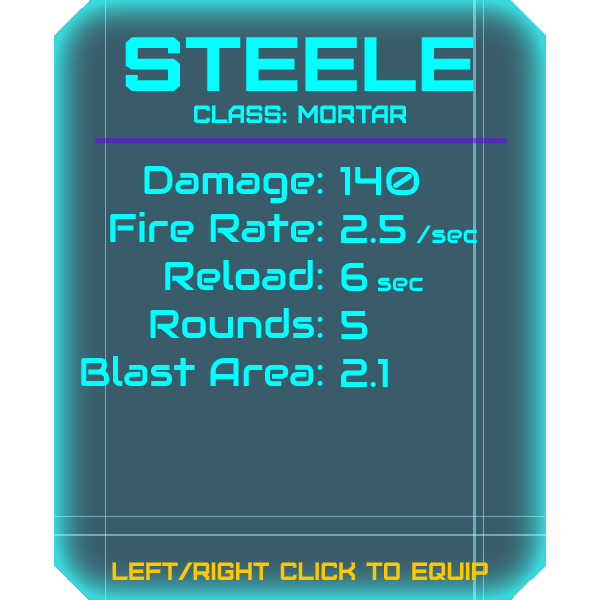
<style>
.page{position:relative;width:600px;height:600px;background:#3a5c6a}
.page>*{position:absolute;margin:0}
.t1{font:76.8px "Furore";color:#00ffff;scale:1.13 1}
.t2{font:25px "Furore";color:#00ffff}
.t3{font:40px "Audiowide-Regular";color:#00ffff}
.t4{font:25px "Audiowide-Regular";color:#00ffff}
.t5{font:25px "Furore";color:#ffc700}
</style>
<div class="page">
<p class="t1" style="left:125px;top:37px;width:349px;height:54px">steele</p>
<p class="t2" style="left:194px;top:105px;width:212px;height:18px">Class: mortar</p>
<p class="t3" style="left:81px;top:165px;width:242px;height:221px;text-align:right">Damage:<br>Fire Rate:<br>Reload:<br>Rounds:<br>Blast Area:</p>
<p class="t3" style="left:340px;top:166px;width:137px;height:221px">140<br>2.5 <span class="t4">/sec<br></span>6 <span class="t4">sec<br></span>5<br>2.1</p>
<p class="t5" style="left:112px;top:562px;width:376px;height:18px">left/right click to equip</p>
</div>
